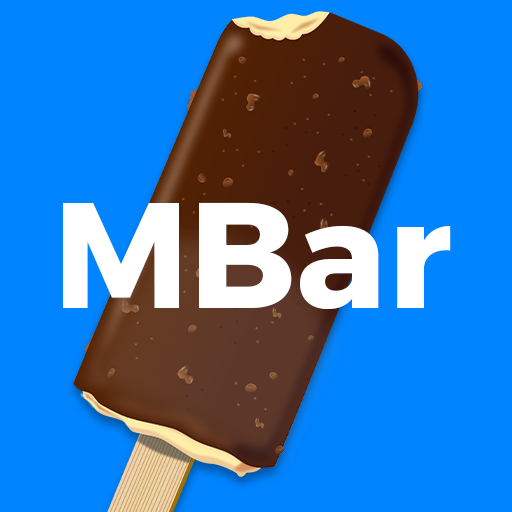
<style>
.page{position:relative;width:512px;height:512px;background:#0084ff}
.page>*{position:absolute;margin:0}
.t1{font:150px "Montserrat-Bold";color:#ffffff}
</style>
<div class="page">
<p class="t1" style="left:63px;top:202px;width:388px;height:108px">MBar</p>
</div>
